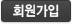
<style>
.page{position:relative;width:72px;height:24px}
.page>*{position:absolute;margin:0}
.t1{font:14px "YDIYGO340";color:#ffffff;scale:0.9 1}
</style>
<div class="page">
<p class="t1" style="left:13px;top:4px;width:46px;height:14px">회원가입</p>
</div>
